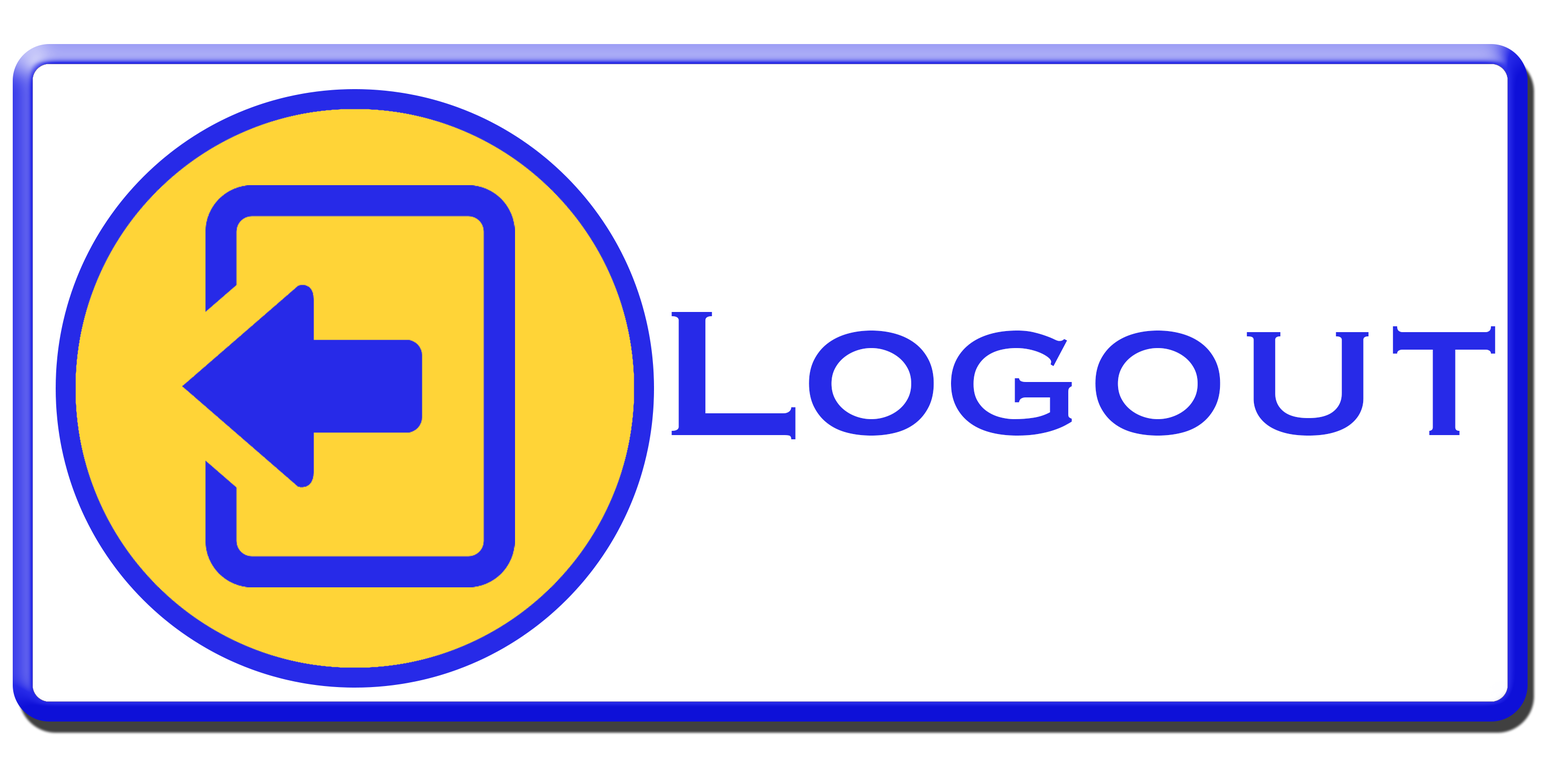
<style>
.page{position:relative;width:1561px;height:764px;background:#ffffff}
.page>*{position:absolute;margin:0}
.t1{font:234.3px "Copperplate";color:#272ae8}
</style>
<div class="page">
<p class="t1" style="left:672px;top:312px;width:823px;height:127px">Logout</p>
</div>
